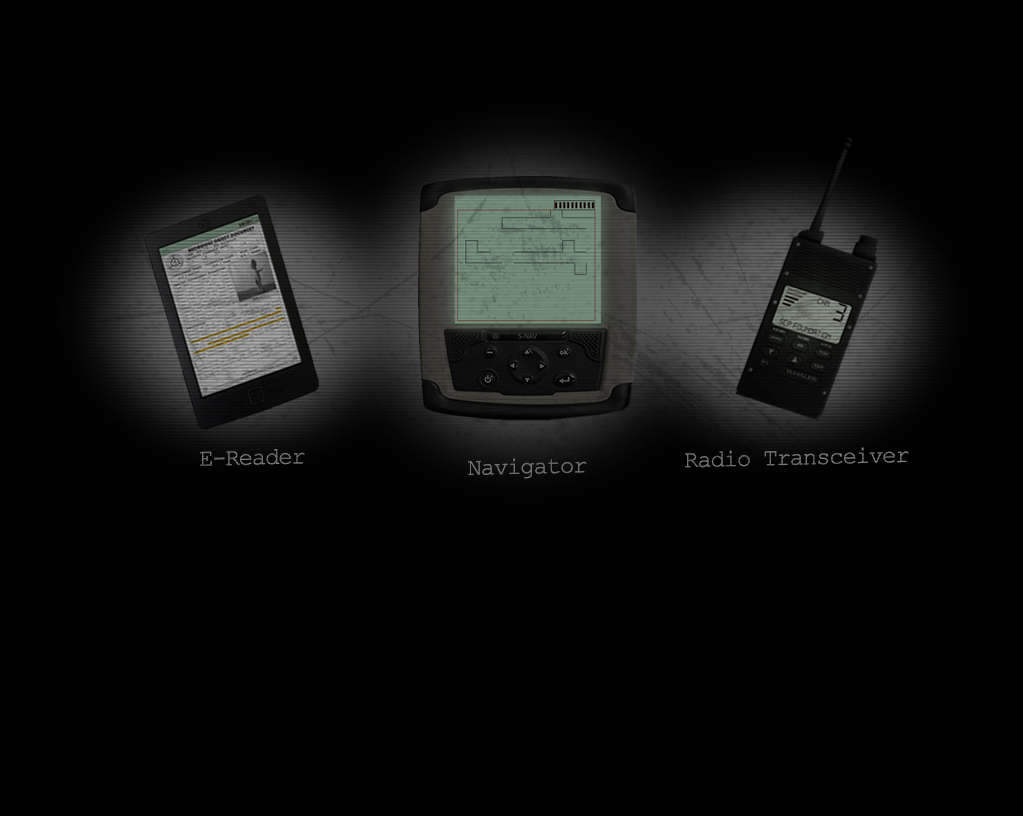
<style>
.page{position:relative;width:1023px;height:816px;background:#000000}
.page>*{position:absolute;margin:0}
.t1{font:24px "CourierNewPSMT";letter-spacing:-0.05em;color:#6d6b6c}
.t2{font:24px "CourierNewPSMT";letter-spacing:-0.05em;color:#727071}
.t3{font:24px "CourierNewPSMT";letter-spacing:-0.05em;color:#706e6f}
</style>
<div class="page">
<p class="t1" style="left:200px;top:449px;width:105px;height:17px;rotate:-1deg">E-Reader</p>
<p class="t2" style="left:685px;top:447px;width:224px;height:21px;rotate:-1deg">Radio Transceiver</p>
<p class="t3" style="left:468px;top:458px;width:119px;height:21px;rotate:-1deg">Navigator</p>
</div>
